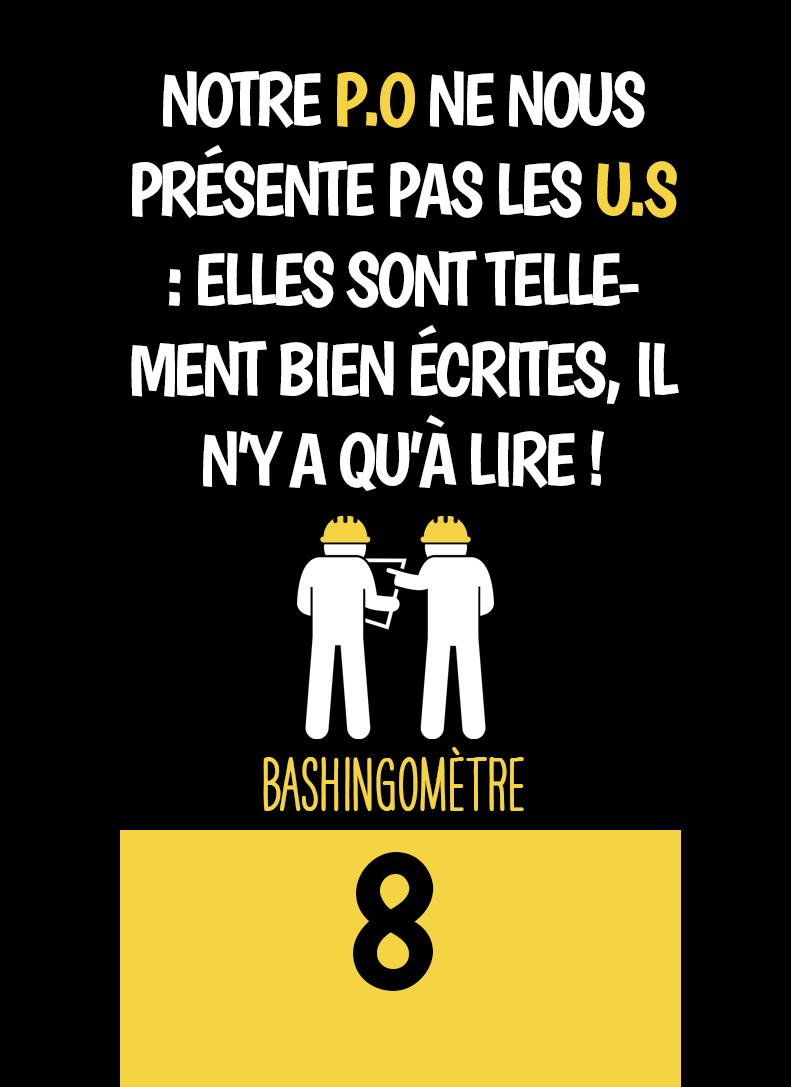
<style>
.page{position:relative;width:791px;height:1087px;background:#000000}
.page>*{position:absolute;margin:0}
.t1{font:75px "Boogaloo-Regular";letter-spacing:-0.06em;color:#ffffff}
.t2{font:75px "Boogaloo-Regular";letter-spacing:-0.06em;color:#f4d443}
.t3{font:66.7px "HAVEANICEDAYTallW04-Bold";color:#f4d443}
.t4{font:200px "Boogaloo-Regular";color:#000000}
</style>
<div class="page">
<p class="t1" style="left:131px;top:71px;width:548px;height:420px;text-align:center">NOTRE <span class="t2">P.O</span> NE NOUS PRÉSENTE PAS LES <span class="t2">U.S</span> : ELLES SONT TELLEMENT BIEN ÉCRITES, IL N’Y A QU’À LIRE !</p>
<p class="t3" style="left:263px;top:747px;width:261px;height:64px">BASHINgomètre</p>
<p class="t4" style="left:353px;top:852px;width:81px;height:139px">8</p>
</div>
